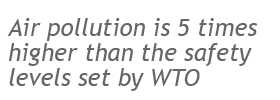
<style>
.page{position:relative;width:280px;height:100px;background:#ffffff}
.page>*{position:absolute;margin:0}
.t1{font:24px/25px "TrebuchetMS-Italic";color:#666666}
</style>
<div class="page">
<p class="t1" style="left:7px;top:18px;width:251px;height:73px">Air pollution is 5 times <br>higher than the safety <br>levels set by WTO</p>
</div>
